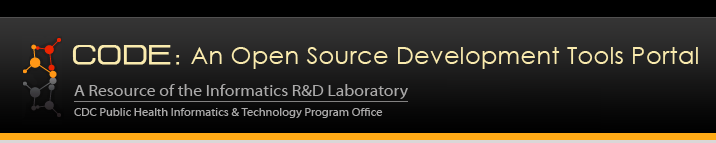
<style>
.page{position:relative;width:716px;height:143px}
.page>*{position:absolute;margin:0}
.t1{font:24px "CenturyGothic";letter-spacing:0.014em;color:#faebae}
.t2{font:34px "HURTMOLD";letter-spacing:0.014em;color:#faebae;font-weight:bold}
.t3{font:12px/20px "MyriadWebPro";color:#aaa9a9}
.t4{font:17px/20px "MyriadWebPro";color:#aaa9a9}
</style>
<div class="page">
<p class="t1" style="left:72px;top:45px;width:626px;height:24px"><span class="t2">CODE: </span>An Open Source Development Tools Portal</p>
<p class="t3" style="left:74px;top:84px;width:334px;height:34px"><span class="t4">A Resource of the Informatics R&amp;D Laboratory<br></span>CDC Public Health Informatics &amp; Technology Program Office</p>
</div>
